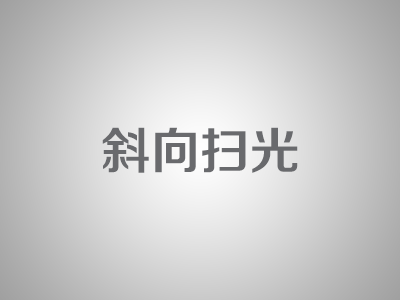
<style>
.page{position:relative;width:400px;height:300px}
.page>*{position:absolute;margin:0}
.t1{font:50px "FZZZHONGJW--GB1-0";letter-spacing:-0.01em;color:#686a6d}
</style>
<div class="page">
<p class="t1" style="left:102px;top:127px;width:196px;height:46px">斜向扫光</p>
</div>
